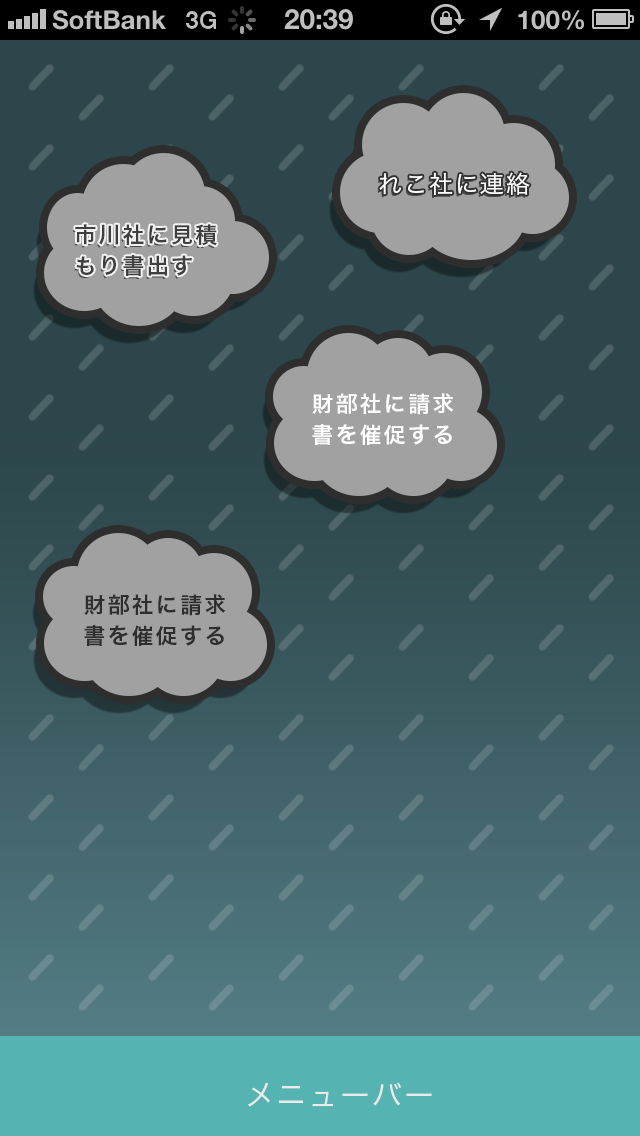
<style>
.page{position:relative;width:640px;height:1136px;background:#2c464b}
.page>*{position:absolute;margin:0}
.t1{font:24px "HiraKakuPro-W3";letter-spacing:0.06em;color:#fefefe}
.t2{font:22px/31px "HiraKakuPro-W6";letter-spacing:0.1em;color:#3f3f3f}
.t3{font:22px/31px "HiraKakuPro-W6";letter-spacing:0.1em;color:#fefefe}
.t4{font:22px/31px "HiraKakuPro-W6";letter-spacing:0.1em;color:#2e2e2e}
.t5{font:30px "HiraKakuPro-W3";letter-spacing:0.06em;color:#ebebeb}
</style>
<div class="page">
<p class="t1" style="left:379px;top:172px;width:151px;height:23px">れこ社に連絡</p>
<p class="t2" style="left:75px;top:224px;width:142px;height:52px">市川社に見積<br>もり書出す</p>
<p class="t3" style="left:312px;top:393px;width:142px;height:52px">財部社に請求<br>書を催促する</p>
<p class="t4" style="left:84px;top:594px;width:142px;height:52px">財部社に請求<br>書を催促する</p>
<p class="t5" style="left:248px;top:1082px;width:184px;height:25px">メニューバー</p>
</div>
